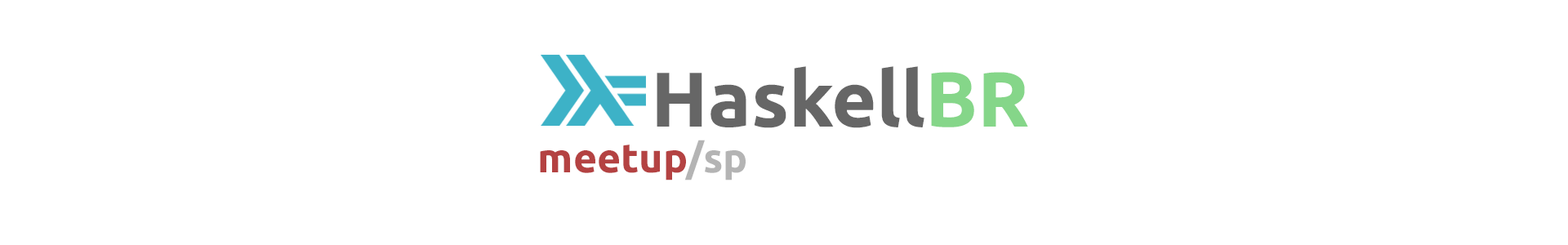
<style>
.page{position:relative;width:1568px;height:245px;background:#ffffff}
.page>*{position:absolute;margin:0}
.t1{font:77.6px "Ubuntu-Bold";color:#666666}
.t2{font:77.6px "Ubuntu-Bold";color:#85d689}
.t3{font:40.8px "Ubuntu-Bold";color:#b44242}
.t4{font:40.8px "Ubuntu-Bold";color:#b4b4b4}
</style>
<div class="page">
<p class="t1" style="left:657px;top:66px;width:371px;height:62px">Haskell<span class="t2">BR</span></p>
<p class="t3" style="left:540px;top:140px;width:206px;height:40px">meetup<span class="t4">/sp</span></p>
</div>
